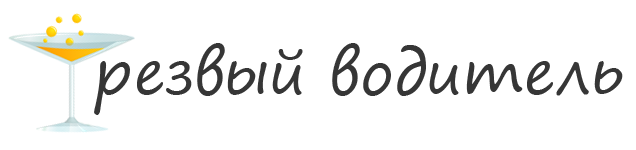
<style>
.page{position:relative;width:636px;height:150px;background:#ffffff}
.page>*{position:absolute;margin:0}
.t1{font:60px "SegoePrint";color:#363636}
</style>
<div class="page">
<p class="t1" style="left:94px;top:43px;width:529px;height:72px">резвый водитель</p>
</div>
